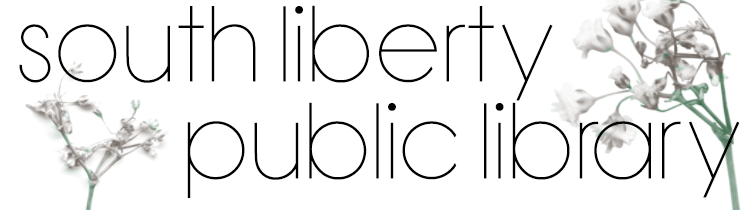
<style>
.page{position:relative;width:750px;height:210px;background:#ffffff}
.page>*{position:absolute;margin:0}
.t1{font:75px "BondoluoPeek";color:#000000}
</style>
<div class="page">
<p class="t1" style="left:19px;top:5px;width:534px;height:96px">South liberty</p>
<p class="t1" style="left:187px;top:102px;width:553px;height:96px">public library</p>
</div>
